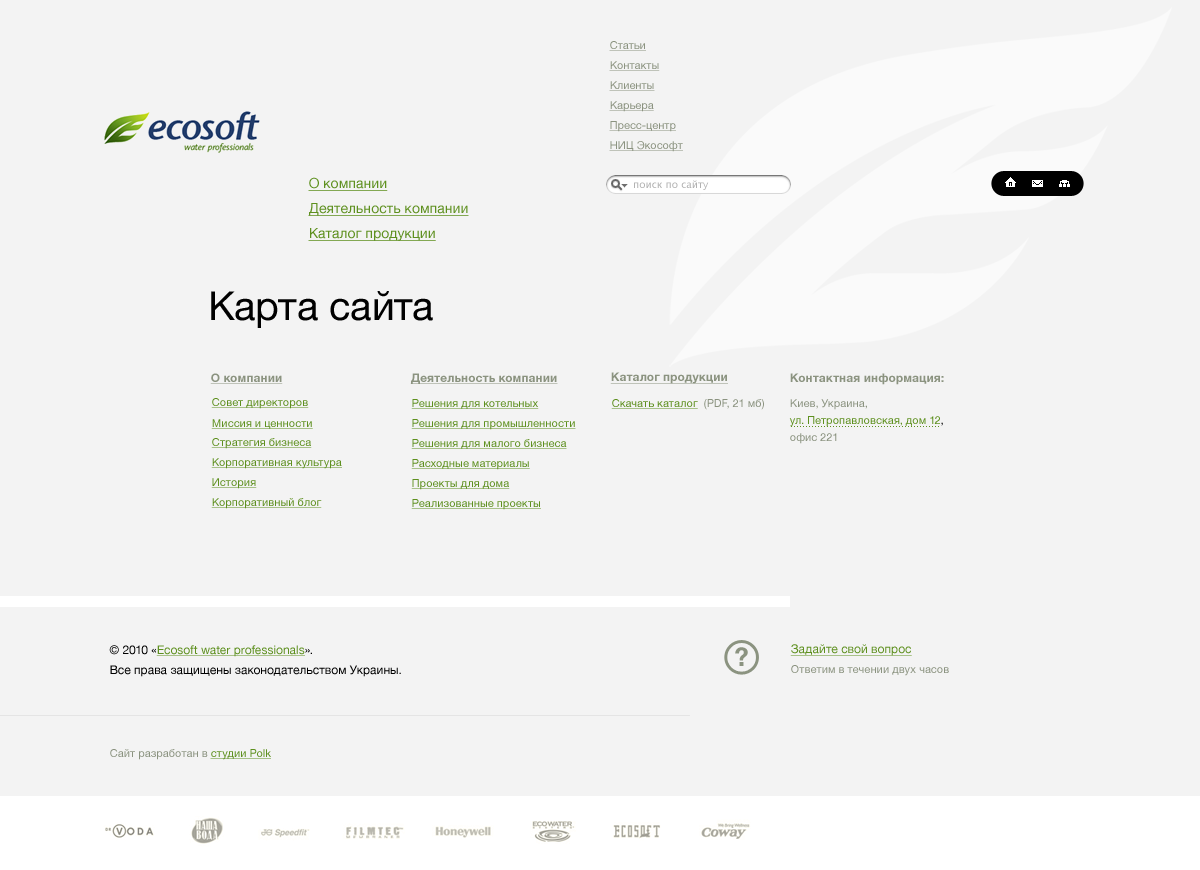
<style>
.page{position:relative;width:1200px;height:870px;background:#f3f3f3}
.page>*{position:absolute;margin:0}
.t1{font:11px "HelveticaNeue";color:#8b9380;text-decoration:underline}
.t2{font:14px "HelveticaNeue";color:#5e901f;text-decoration:underline}
.t3{font:10px "LucidaGrande";color:#b2b2b2}
.t4{font:40px "HelveticaNeue";color:#000000}
.t5{font:12px "HelveticaNeue-Bold";color:#8b9380;text-decoration:underline}
.t6{font:11px/17px "HelveticaNeue";color:#5e901f}
.t7{font:12px/20px "HelveticaNeue-Bold";color:#8b9380}
.t8{font:11px/25px "HelveticaNeue";color:#8b9380}
.t9{font:11px/17px "HelveticaNeue";color:#000000}
.t10{font:11px/17px "HelveticaNeue";color:#8b9380}
.t11{font:11px "HelveticaNeue";color:#5e901f;text-decoration:underline}
.t12{font:11px "HelveticaNeue";color:#8b9380}
.t13{font:12px/20px "HelveticaNeue";color:#000000}
.t14{font:12px/20px "HelveticaNeue";color:#5e901f;text-decoration:underline}
.t15{font:12px "HelveticaNeue";color:#5e901f;text-decoration:underline}
</style>
<div class="page">
<p class="t1" style="left:609px;top:41px;width:37px;height:10px">Статьи</p>
<p class="t1" style="left:609px;top:61px;width:51px;height:10px">Контакты</p>
<p class="t1" style="left:609px;top:81px;width:46px;height:10px">Клиенты</p>
<p class="t1" style="left:609px;top:101px;width:45px;height:11px">Карьера</p>
<p class="t1" style="left:609px;top:121px;width:67px;height:11px">Пресс-центр</p>
<p class="t1" style="left:609px;top:141px;width:74px;height:11px">НИЦ Экософт</p>
<p class="t2" style="left:308px;top:177px;width:80px;height:14px">О компании</p>
<p class="t3" style="left:634px;top:180px;width:75px;height:10px">поиск по сайту</p>
<p class="t2" style="left:308px;top:203px;width:161px;height:13px">Деятельность компании</p>
<p class="t2" style="left:308px;top:228px;width:128px;height:13px">Каталог продукции</p>
<p class="t4" style="left:211px;top:291px;width:222px;height:37px">Карта сайта</p>
<p class="t5" style="left:210px;top:373px;width:73px;height:11px">О компании</p>
<p class="t5" style="left:410px;top:373px;width:148px;height:11px">Деятельность компании</p>
<p class="t5" style="left:610px;top:372px;width:118px;height:12px">Каталог продукции</p>
<p class="t6" style="left:789px;top:373px;width:155px;height:71px"><span class="t7">Контактная информация:<br></span><span class="t8">Киев, Украина,<br></span>ул. Петропавловская, дом 12<span class="t9">,<br></span><span class="t10">офис 221</span></p>
<p class="t11" style="left:211px;top:398px;width:98px;height:11px">Совет директоров</p>
<p class="t11" style="left:411px;top:399px;width:128px;height:10px">Решения для котельных</p>
<p class="t11" style="left:611px;top:399px;width:87px;height:10px">Скачать каталог</p>
<p class="t12" style="left:704px;top:399px;width:60px;height:11px">(PDF, 21 мб)</p>
<p class="t11" style="left:211px;top:419px;width:102px;height:10px">Миссия и ценности</p>
<p class="t11" style="left:411px;top:419px;width:165px;height:11px">Решения для промышленности</p>
<p class="t11" style="left:211px;top:438px;width:101px;height:11px">Стратегия бизнеса</p>
<p class="t11" style="left:411px;top:439px;width:156px;height:10px">Решения для малого бизнеса</p>
<p class="t11" style="left:211px;top:458px;width:131px;height:11px">Корпоративная культура</p>
<p class="t11" style="left:411px;top:459px;width:119px;height:11px">Расходные материалы</p>
<p class="t11" style="left:211px;top:478px;width:46px;height:11px">История</p>
<p class="t11" style="left:411px;top:479px;width:99px;height:11px">Проекты для дома</p>
<p class="t11" style="left:211px;top:498px;width:111px;height:11px">Корпоративный блог</p>
<p class="t11" style="left:411px;top:499px;width:130px;height:11px">Реализованные проекты</p>
<p class="t13" style="left:109px;top:645px;width:292px;height:32px">© 2010 «<span class="t14">Ecosoft water professionals</span>».<br>Все права защищены законодательством Украины.</p>
<p class="t15" style="left:790px;top:644px;width:122px;height:12px">Задайте свой вопрос</p>
<p class="t12" style="left:791px;top:665px;width:158px;height:11px">Ответим в течении двух часов</p>
<p class="t12" style="left:110px;top:749px;width:161px;height:11px">Сайт разработан в <span class="t11">студии Polk</span></p>
</div>
